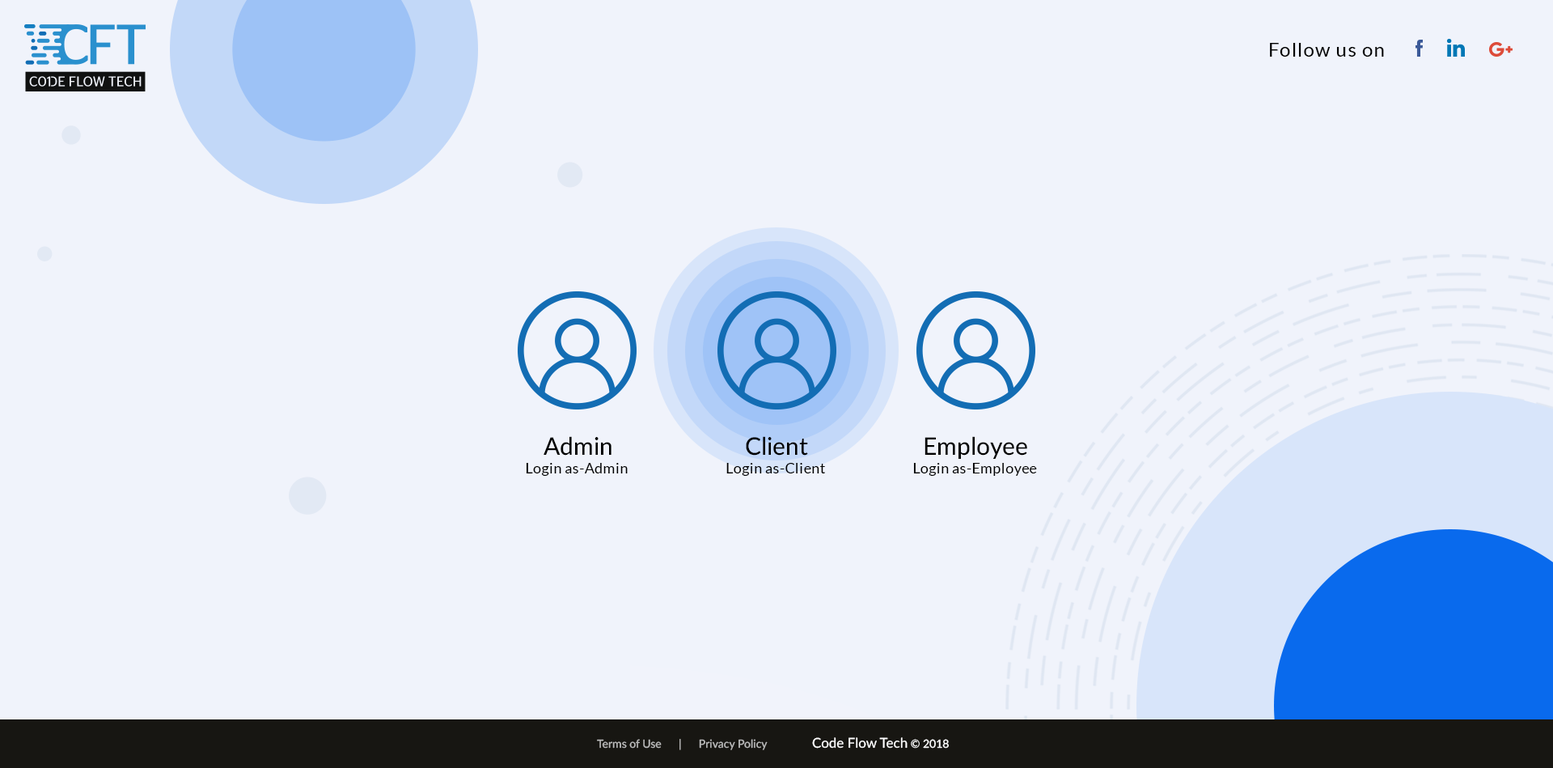
<style>
.page{position:relative;width:1553px;height:768px;background:#f0f3fb}
.page>*{position:absolute;margin:0}
.t1{font:19.4px "Lato-Regular";letter-spacing:0.05em;color:#000000}
.t2{font:24.3px "Lato-Medium";color:#000000}
.t3{font:14.6px "Lato-Regular";letter-spacing:0.025em;color:#000000}
.t4{font:13.8px "Lato-Medium";color:#ffffff}
.t5{font:11.3px "Lato-Medium";color:#ffffff}
.t6{font:11.3px "Lato-Medium";color:#bbbbbb}
</style>
<div class="page">
<p class="t1" style="left:1270px;top:43px;width:114px;height:14px">Follow us on</p>
<p class="t2" style="left:544px;top:436px;width:68px;height:19px">Admin</p>
<p class="t2" style="left:746px;top:436px;width:62px;height:19px">Client</p>
<p class="t2" style="left:925px;top:436px;width:102px;height:23px">Employee</p>
<p class="t3" style="left:526px;top:463px;width:102px;height:13px">Login as-Admin</p>
<p class="t3" style="left:726px;top:463px;width:99px;height:13px">Login as-Client</p>
<p class="t3" style="left:913px;top:463px;width:124px;height:13px">Login as-Employee</p>
<p class="t4" style="left:812px;top:737px;width:137px;height:11px">Code Flow Tech<span class="t5"> © 2018</span></p>
<p class="t6" style="left:597px;top:739px;width:171px;height:11px">Terms of Use      |      Privacy Policy</p>
</div>
